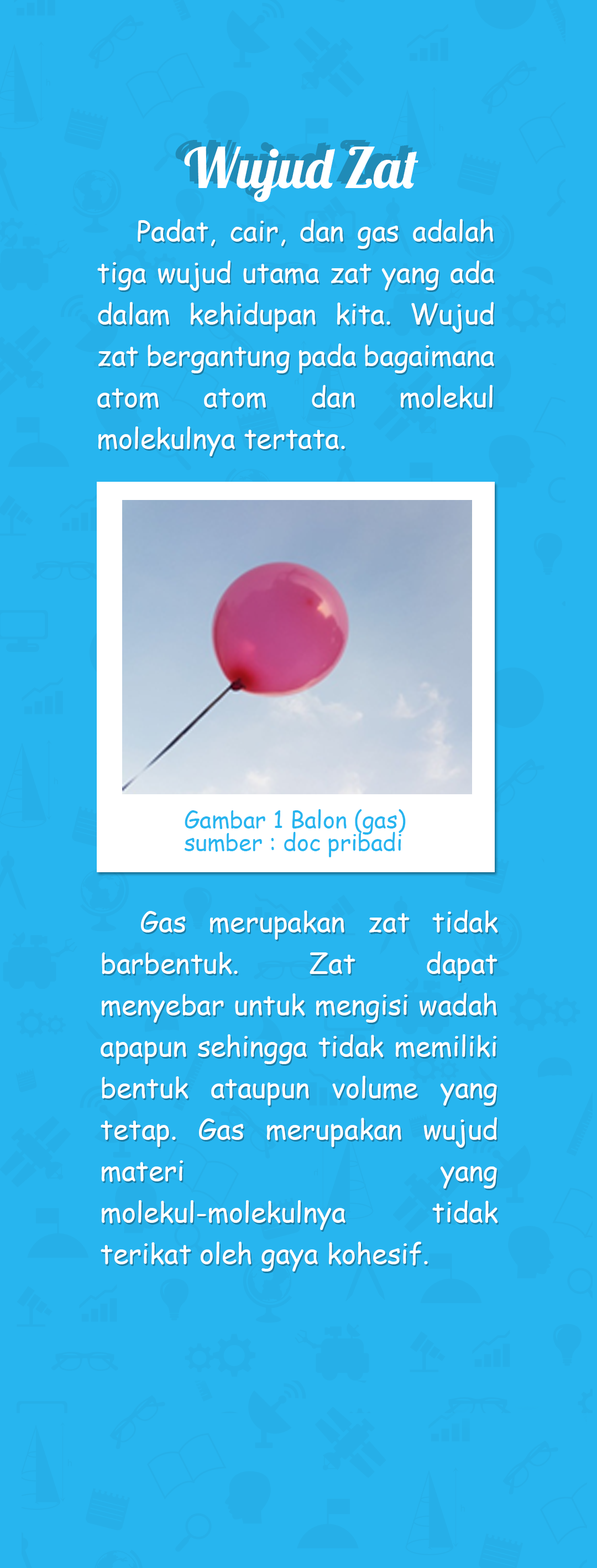
<style>
.page{position:relative;width:597px;height:1568px;background:#27b5ef}
.page>*{position:absolute;margin:0}
.t1{font:55.3px "Lobster-Regular";color:#208bb7}
.t2{font:55.3px "Lobster-Regular"}
.t3{font:55.3px "Lobster-Regular";color:#ffffff}
.t4{font:27.7px/41.5px "ComicSansMS";color:#ffffff}
.t5{font:23.1px/23.1px "ComicSansMS";color:#27b5ef}
</style>
<div class="page">
<p class="t1" style="left:175px;top:140px;width:235px;height:55px">Wujud Zat</p>
<p class="t2" style="left:180px;top:142px;width:235px;height:55px">Wujud Zat</p>
<p class="t3" style="left:184px;top:147px;width:235px;height:55px">Wujud Zat</p>
<p class="t4" style="left:97px;top:219px;width:397px;height:237px;text-align:justify">Padat, cair, dan gas adalah tiga wujud utama zat yang ada dalam kehidupan kita. Wujud zat bergantung pada bagaimana atom atom dan molekul molekulnya tertata.</p>
<p class="t5" style="left:184px;top:809px;width:222px;height:48px;text-align:justify">Gambar 1 Balon (gas) <br>sumber : doc pribadi</p>
<p class="t4" style="left:101px;top:910px;width:397px;height:362px;text-align:justify">Gas merupakan zat tidak barbentuk. Zat dapat menyebar untuk mengisi wadah apapun sehingga tidak memiliki bentuk ataupun volume yang tetap. Gas merupakan wujud materi yang molekul-molekulnya tidak terikat oleh gaya kohesif.</p>
</div>
